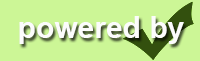
<style>
.page{position:relative;width:200px;height:61px;background:#ccf696}
.page>*{position:absolute;margin:0}
.t1{font:30px "Arial-BoldMT";color:#fcfcfc}
</style>
<div class="page">
<p class="t1" style="left:19px;top:16px;width:165px;height:28px">powered by</p>
</div>
